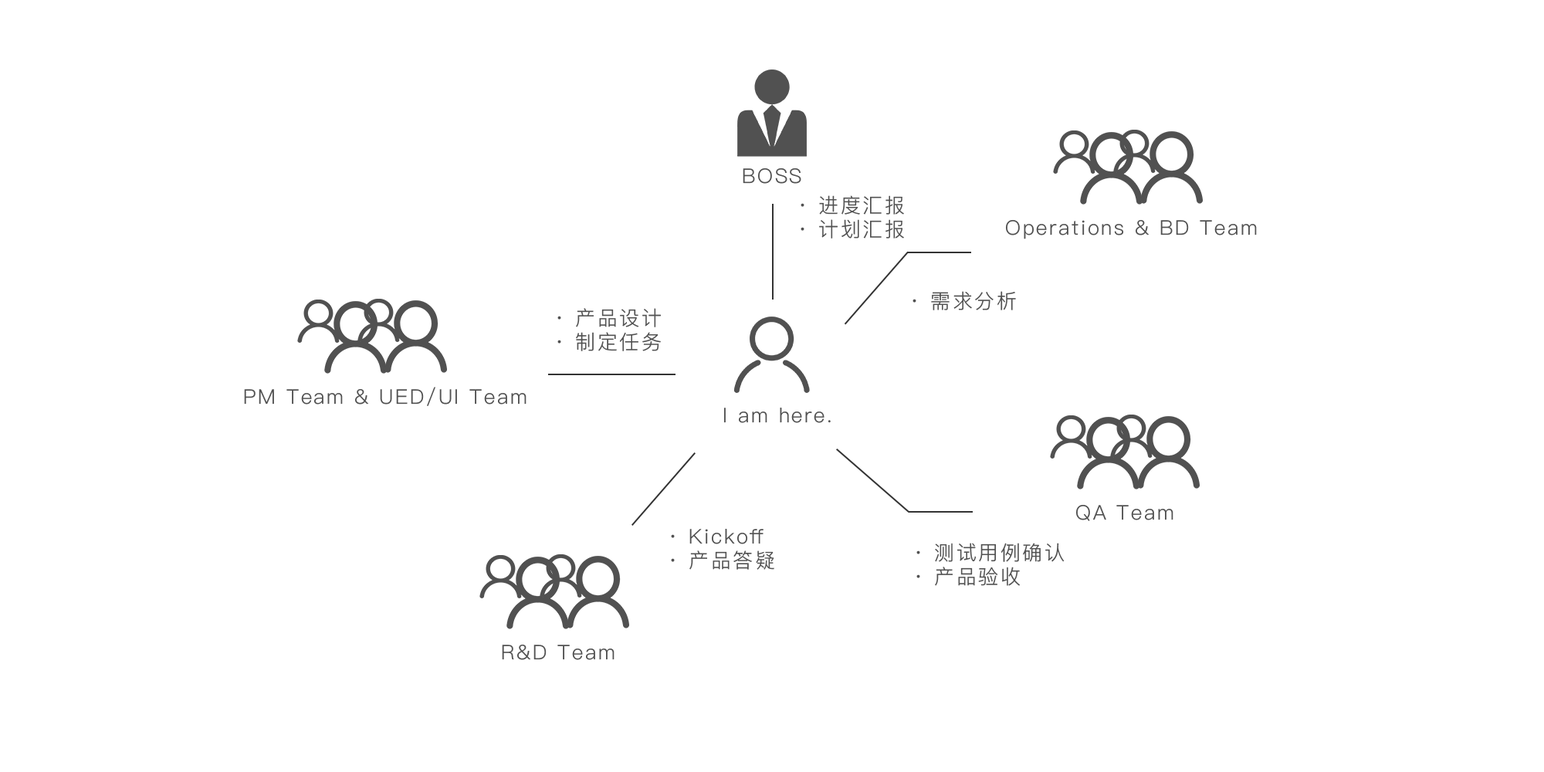
<style>
.page{position:relative;width:1544px;height:772px;background:#ffffff}
.page>*{position:absolute;margin:0}
.t1{font:20.1px "PingFangSC-Light";letter-spacing:0.1em;color:#515151}
.t2{font:20.1px/30.9px "PingFangSC-Light";letter-spacing:0.1em;color:#515151}
</style>
<div class="page">
<p class="t1" style="left:743px;top:168px;width:58px;height:16px">BOSS</p>
<p class="t2" style="left:801px;top:195px;width:103px;height:44px">· 进度汇报<br>· 计划汇报</p>
<p class="t1" style="left:1006px;top:220px;width:251px;height:19px">Operations &amp; BD Team</p>
<p class="t1" style="left:913px;top:291px;width:103px;height:19px">· 需求分析</p>
<p class="t2" style="left:557px;top:308px;width:104px;height:43px">· 产品设计<br>· 制定任务</p>
<p class="t1" style="left:244px;top:387px;width:283px;height:19px">PM Team &amp; UED/UI Team</p>
<p class="t1" style="left:724px;top:408px;width:107px;height:15px">I am here.</p>
<p class="t1" style="left:1076px;top:505px;width:98px;height:16px">QA Team</p>
<p class="t2" style="left:671px;top:529px;width:103px;height:41px">· Kickoff<br>· 产品答疑</p>
<p class="t2" style="left:917px;top:543px;width:148px;height:43px">· 测试用例确认<br>· 产品验收</p>
<p class="t1" style="left:502px;top:645px;width:113px;height:15px">R&amp;D Team</p>
</div>
